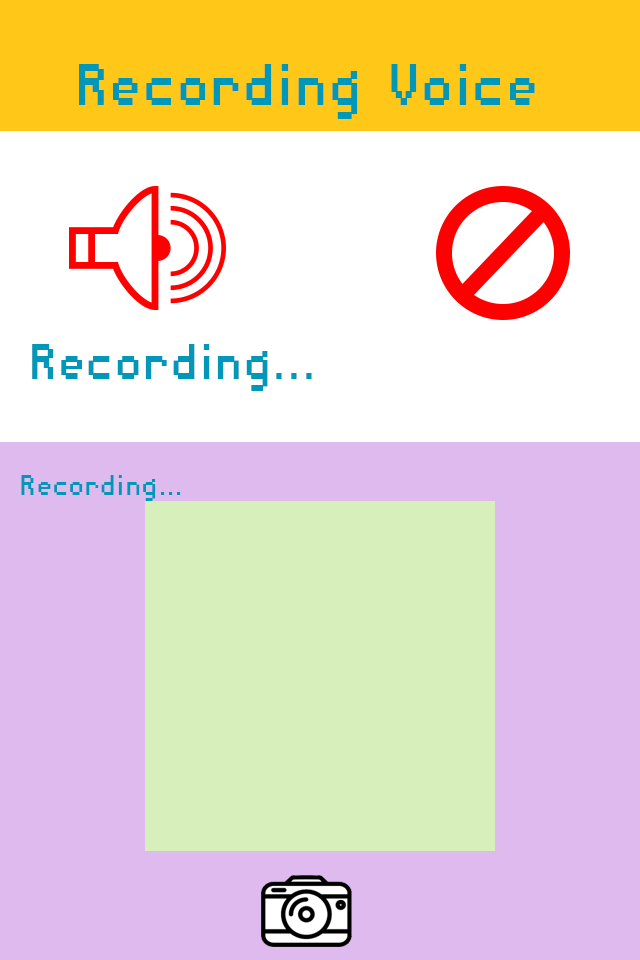
<style>
.page{position:relative;width:640px;height:960px;background:#dfbaef}
.page>*{position:absolute;margin:0}
.t1{font:76.6px "DisposableDroidBB";color:#0097b8;scale:0.91 1}
.t2{font:64.7px "DisposableDroidBB";color:#0097b8;scale:0.91 1}
.t3{font:36.9px "DisposableDroidBB";color:#0097b8;scale:0.91 1}
</style>
<div class="page">
<p class="t1" style="left:79px;top:64px;width:456px;height:55px">Recording Voice</p>
<p class="t2" style="left:32px;top:344px;width:280px;height:47px">Recording...</p>
<p class="t3" style="left:21px;top:475px;width:160px;height:26px">Recording...</p>
</div>
